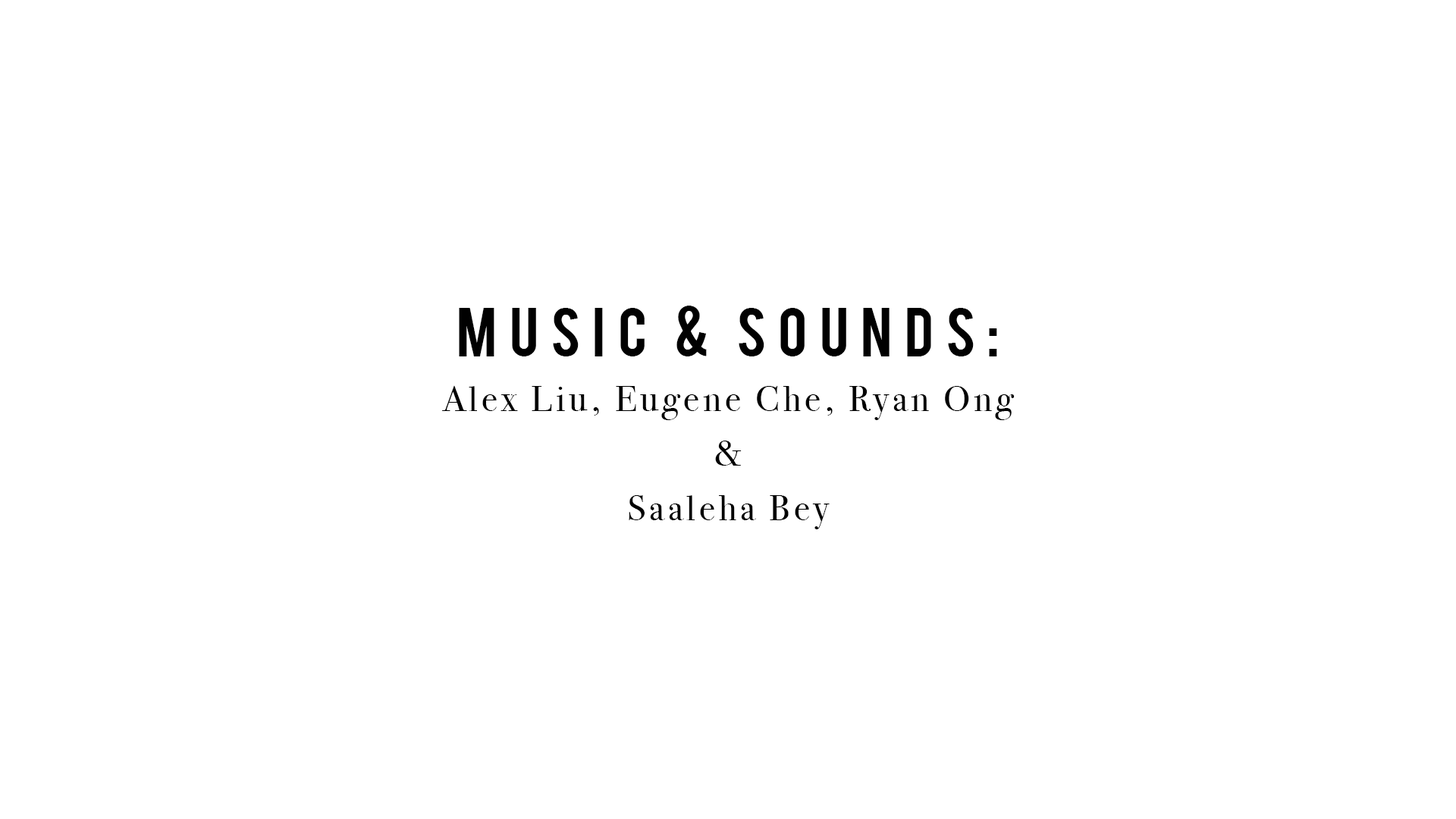
<style>
.page{position:relative;width:1456px;height:819px;background:#ffffff}
.page>*{position:absolute;margin:0}
.t1{font:36.4px/54.6px "BodoniSvtyTwoITCTT-Book";letter-spacing:0.1em;color:#010101}
.t2{font:54.6px/54.6px "Bebas";letter-spacing:0.2em;color:#010101}
</style>
<div class="page">
<p class="t1" style="left:441px;top:306px;width:574px;height:223px;text-align:center"><span class="t2">Music &amp; Sounds:</span><br>Alex Liu, Eugene Che, Ryan Ong<br>&amp;<br>Saaleha Bey</p>
</div>
